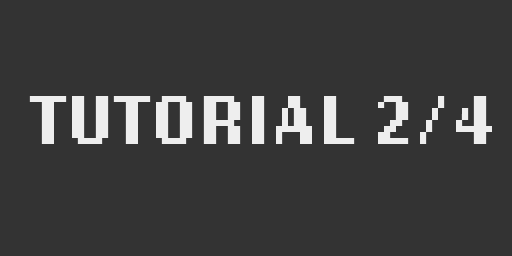
<style>
.page{position:relative;width:512px;height:256px;background:#333333}
.page>*{position:absolute;margin:0}
.t1{font:72px "LoRes12OT-Bold";color:#eeeeee}
</style>
<div class="page">
<p class="t1" style="left:29px;top:96px;width:463px;height:48px">TUTORIAL 2/4</p>
</div>
